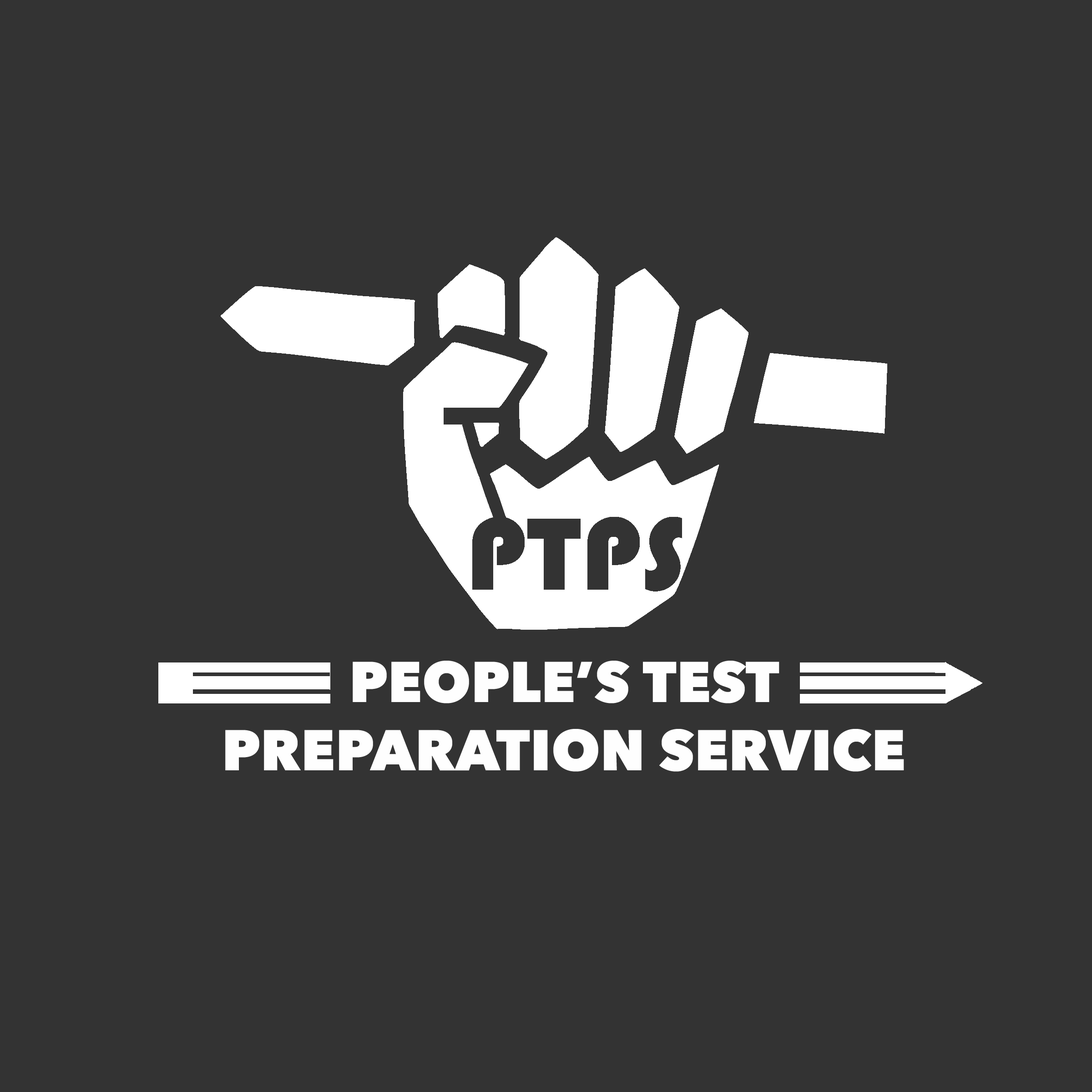
<style>
.page{position:relative;width:1092px;height:1092px;background:#333333}
.page>*{position:absolute;margin:0}
.t1{font:56.9px "AvenirNext-Heavy";color:#fefefe}
</style>
<div class="page">
<p class="t1" style="left:225px;top:661px;width:679px;height:111px;text-align:center">PEOPLE’S TEST <br>PREPARATION SERVICE</p>
</div>
